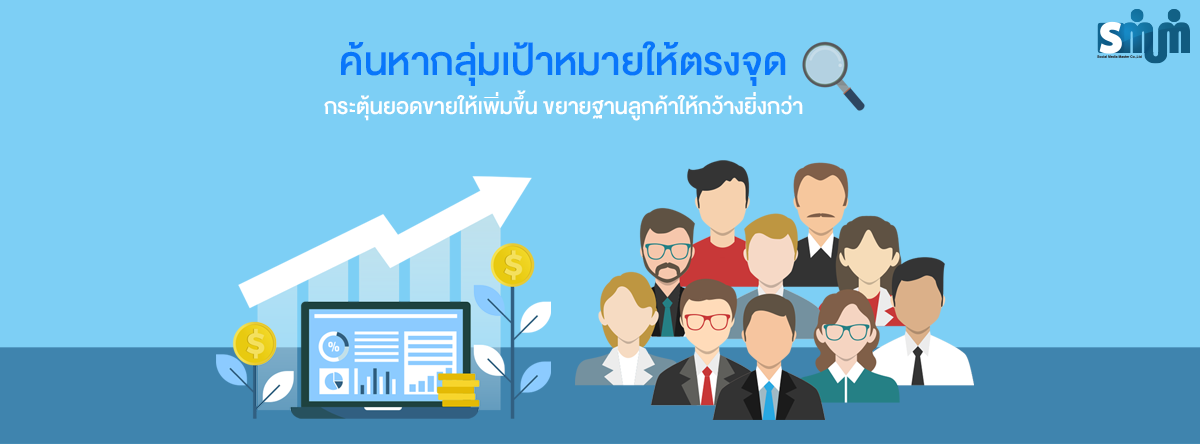
<style>
.page{position:relative;width:1200px;height:444px;background:#7dcff5}
.page>*{position:absolute;margin:0}
.t1{font:30.9px/38.7px "DBHeavent-Med";color:#ffffff}
.t2{font:55.4px/38.7px "DBHeavent-Med";color:#0876fa}
</style>
<div class="page">
<p class="t1" style="left:324px;top:41px;width:479px;height:80px;text-align:center"><span class="t2">ค้นหากลุ่มเป้าหมายให้ตรงจุด<br></span>กระตุ้นยอดขายให้เพิ่มขึ้น ขยายฐานลูกค้าให้กว้างยิ่งกว่า</p>
</div>
